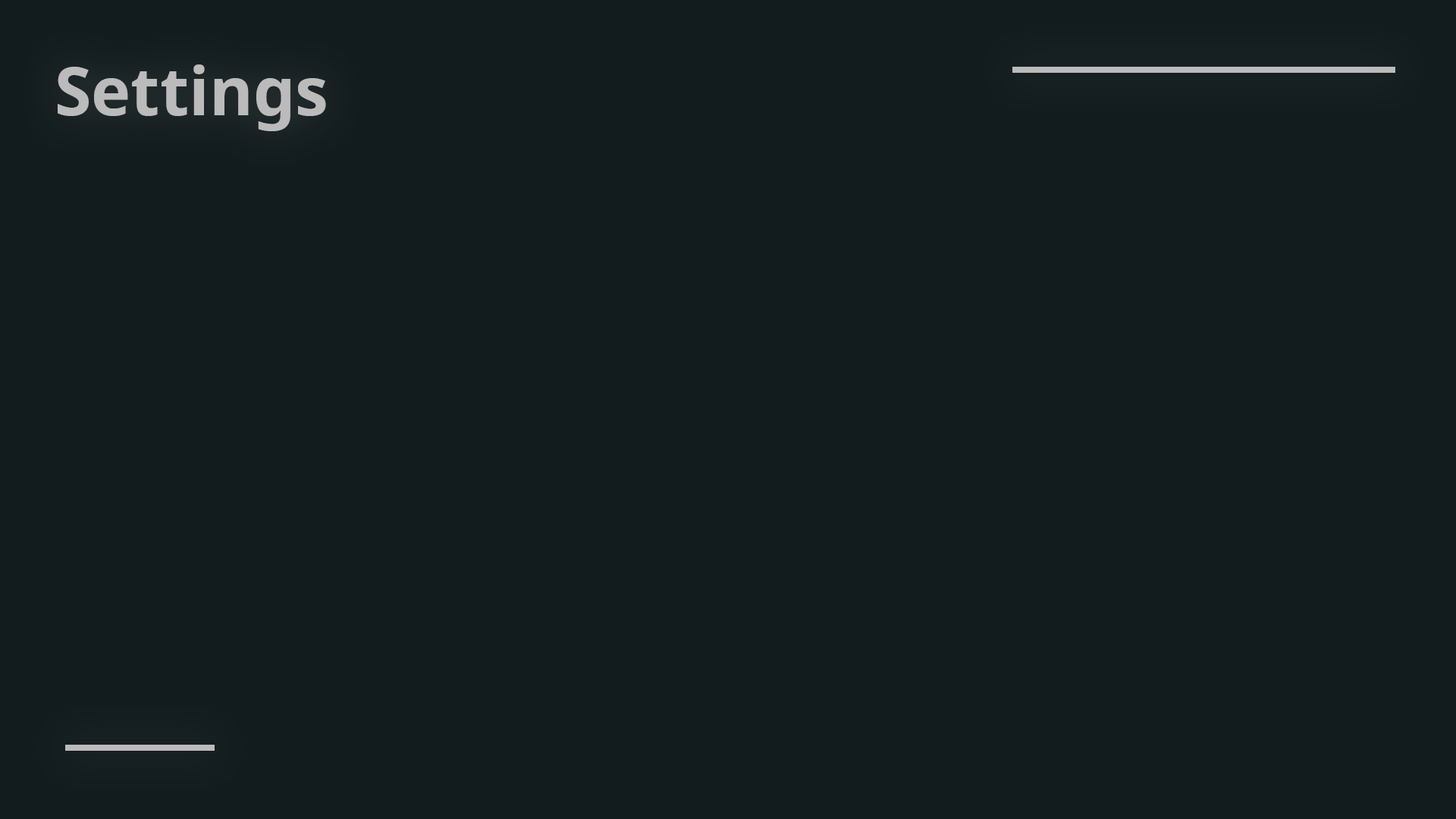
<style>
.page{position:relative;width:1456px;height:819px;background:#121b1d}
.page>*{position:absolute;margin:0}
.t1{font:66.7px "NotoSans-Bold";color:#bbbbbb}
</style>
<div class="page">
<p class="t1" style="left:58px;top:64px;width:268px;height:67px">Settings</p>
</div>
